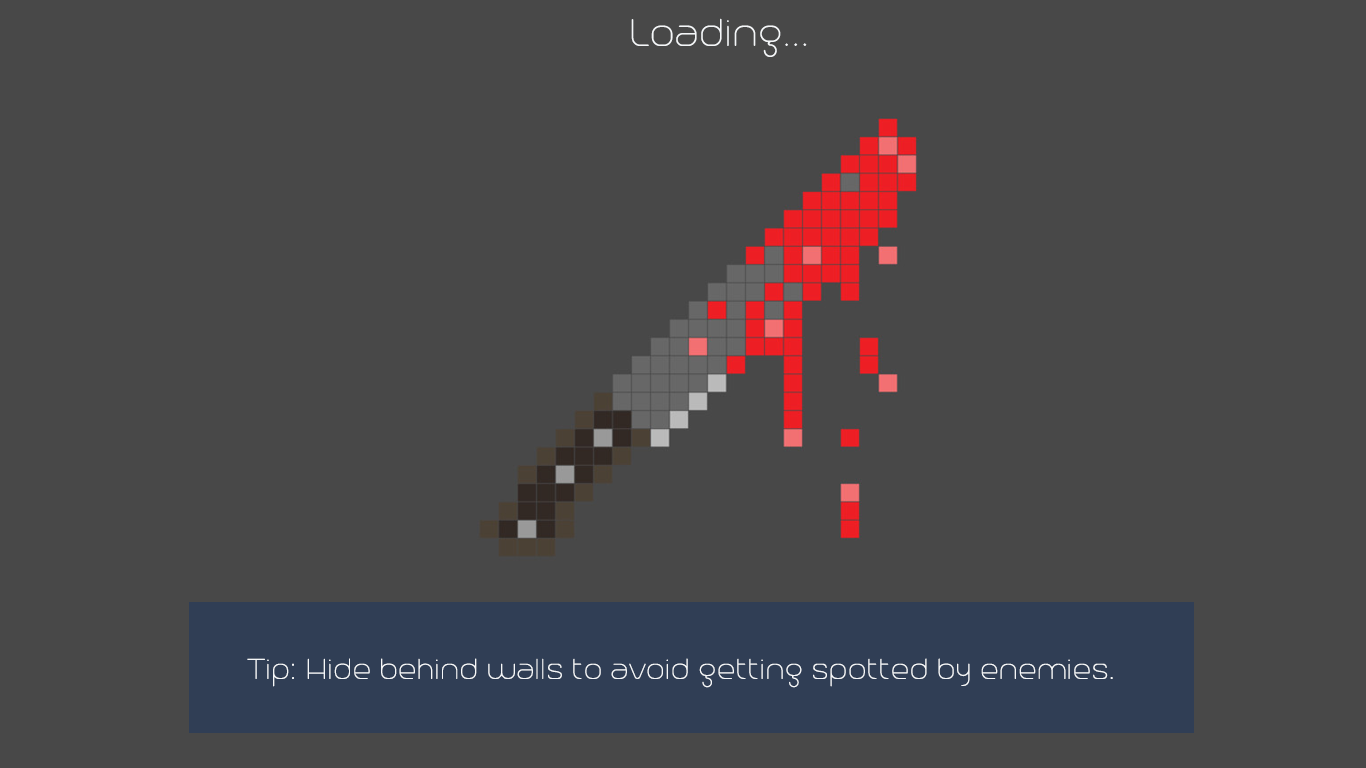
<style>
.page{position:relative;width:1366px;height:768px;background:#484848}
.page>*{position:absolute;margin:0}
.t1{font:48px "Trench-Thin";color:#f5f7f9}
.t2{font:36px "Trench-Thin";color:#f5f7f9}
</style>
<div class="page">
<p class="t1" style="left:631px;top:18px;width:176px;height:39px">Loading...</p>
<p class="t2" style="left:247px;top:658px;width:866px;height:30px">Tip: Hide behind walls to avoid getting spotted by enemies.</p>
</div>
